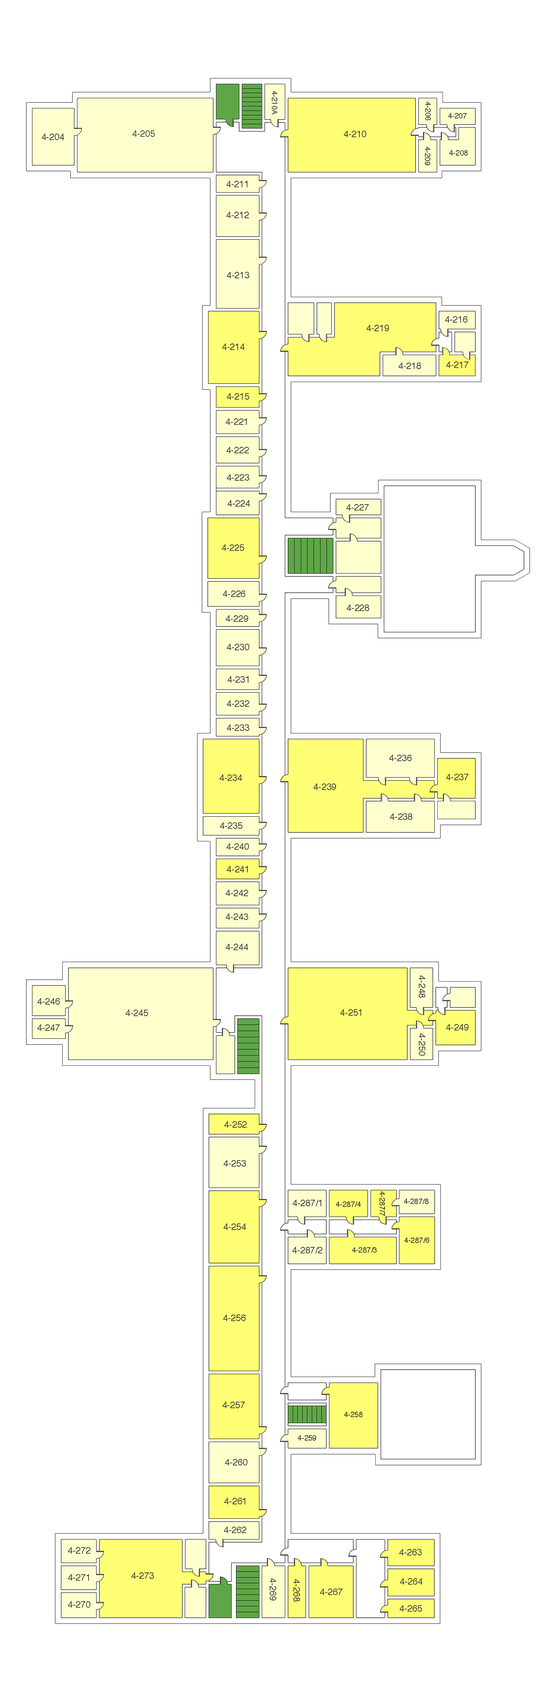
<style>
.page{position:relative;width:556px;height:1702px;background:#ffffff}
.page>*{position:absolute;margin:0}
.t1{font:7.5px "Helvetica";color:#3f3f3f}
.t2{font:9px "Helvetica";color:#3f3f3f}
</style>
<div class="page">
<p class="t1" style="left:272px;top:91px;width:5px;height:23px;rotate:90deg">4-210A</p>
<p class="t1" style="left:425px;top:102px;width:6px;height:18px;rotate:90deg">4-206</p>
<p class="t1" style="left:448px;top:113px;width:19px;height:5px">4-207</p>
<p class="t2" style="left:42px;top:134px;width:22px;height:6px">4-204</p>
<p class="t2" style="left:132px;top:130px;width:23px;height:7px">4-205</p>
<p class="t2" style="left:344px;top:131px;width:22px;height:6px">4-210</p>
<p class="t1" style="left:425px;top:147px;width:5px;height:18px;rotate:90deg">4-209</p>
<p class="t1" style="left:449px;top:150px;width:19px;height:6px">4-208</p>
<p class="t2" style="left:226px;top:181px;width:21px;height:6px">4-211</p>
<p class="t2" style="left:226px;top:212px;width:23px;height:6px">4-212</p>
<p class="t2" style="left:227px;top:272px;width:22px;height:6px">4-213</p>
<p class="t2" style="left:445px;top:316px;width:22px;height:7px">4-216</p>
<p class="t2" style="left:366px;top:325px;width:23px;height:6px">4-219</p>
<p class="t2" style="left:222px;top:343px;width:22px;height:7px">4-214</p>
<p class="t2" style="left:398px;top:362px;width:23px;height:7px">4-218</p>
<p class="t2" style="left:446px;top:361px;width:22px;height:7px">4-217</p>
<p class="t2" style="left:227px;top:393px;width:22px;height:7px">4-215</p>
<p class="t2" style="left:226px;top:418px;width:21px;height:7px">4-221</p>
<p class="t2" style="left:226px;top:447px;width:23px;height:6px">4-222</p>
<p class="t2" style="left:227px;top:474px;width:22px;height:7px">4-223</p>
<p class="t2" style="left:228px;top:500px;width:22px;height:6px">4-224</p>
<p class="t2" style="left:346px;top:504px;width:23px;height:6px">4-227</p>
<p class="t2" style="left:222px;top:544px;width:22px;height:7px">4-225</p>
<p class="t2" style="left:223px;top:590px;width:22px;height:7px">4-226</p>
<p class="t2" style="left:347px;top:604px;width:22px;height:7px">4-228</p>
<p class="t2" style="left:226px;top:615px;width:22px;height:7px">4-229</p>
<p class="t2" style="left:227px;top:644px;width:22px;height:6px">4-230</p>
<p class="t2" style="left:228px;top:676px;width:20px;height:7px">4-231</p>
<p class="t2" style="left:227px;top:700px;width:22px;height:7px">4-232</p>
<p class="t2" style="left:227px;top:724px;width:22px;height:7px">4-233</p>
<p class="t2" style="left:389px;top:755px;width:22px;height:6px">4-236</p>
<p class="t2" style="left:446px;top:774px;width:22px;height:6px">4-237</p>
<p class="t2" style="left:220px;top:774px;width:22px;height:7px">4-234</p>
<p class="t2" style="left:314px;top:783px;width:22px;height:7px">4-239</p>
<p class="t2" style="left:390px;top:813px;width:22px;height:7px">4-238</p>
<p class="t2" style="left:220px;top:822px;width:22px;height:7px">4-235</p>
<p class="t2" style="left:226px;top:843px;width:23px;height:7px">4-240</p>
<p class="t2" style="left:227px;top:866px;width:21px;height:6px">4-241</p>
<p class="t2" style="left:226px;top:890px;width:22px;height:6px">4-242</p>
<p class="t2" style="left:226px;top:913px;width:22px;height:7px">4-243</p>
<p class="t2" style="left:226px;top:944px;width:22px;height:6px">4-244</p>
<p class="t2" style="left:419px;top:975px;width:6px;height:22px;rotate:90deg">4-248</p>
<p class="t2" style="left:37px;top:998px;width:23px;height:6px">4-246</p>
<p class="t2" style="left:126px;top:1009px;width:22px;height:7px">4-245</p>
<p class="t2" style="left:340px;top:1009px;width:21px;height:6px">4-251</p>
<p class="t2" style="left:37px;top:1024px;width:23px;height:7px">4-247</p>
<p class="t2" style="left:446px;top:1024px;width:22px;height:6px">4-249</p>
<p class="t2" style="left:419px;top:1033px;width:6px;height:22px;rotate:90deg">4-250</p>
<p class="t2" style="left:224px;top:1121px;width:23px;height:6px">4-252</p>
<p class="t2" style="left:224px;top:1160px;width:22px;height:6px">4-253</p>
<p class="t1" style="left:379px;top:1191px;width:6px;height:25px;rotate:90deg">4-287/7</p>
<p class="t2" style="left:293px;top:1199px;width:28px;height:7px">4-287/1</p>
<p class="t1" style="left:336px;top:1201px;width:25px;height:6px">4-287/4</p>
<p class="t1" style="left:404px;top:1198px;width:24px;height:6px">4-287/8</p>
<p class="t2" style="left:224px;top:1223px;width:22px;height:7px">4-254</p>
<p class="t1" style="left:404px;top:1237px;width:25px;height:6px">4-287/6</p>
<p class="t2" style="left:292px;top:1247px;width:30px;height:6px">4-287/2</p>
<p class="t1" style="left:352px;top:1247px;width:25px;height:5px">4-287/3</p>
<p class="t2" style="left:223px;top:1314px;width:23px;height:7px">4-256</p>
<p class="t2" style="left:222px;top:1401px;width:23px;height:7px">4-257</p>
<p class="t1" style="left:344px;top:1411px;width:18px;height:6px">4-258</p>
<p class="t1" style="left:298px;top:1435px;width:18px;height:5px">4-259</p>
<p class="t2" style="left:225px;top:1459px;width:22px;height:6px">4-260</p>
<p class="t2" style="left:224px;top:1498px;width:21px;height:6px">4-261</p>
<p class="t2" style="left:224px;top:1526px;width:22px;height:7px">4-262</p>
<p class="t2" style="left:68px;top:1547px;width:22px;height:6px">4-272</p>
<p class="t2" style="left:399px;top:1549px;width:23px;height:6px">4-263</p>
<p class="t2" style="left:68px;top:1574px;width:21px;height:6px">4-271</p>
<p class="t2" style="left:131px;top:1572px;width:23px;height:7px">4-273</p>
<p class="t2" style="left:270px;top:1578px;width:6px;height:22px;rotate:90deg">4-269</p>
<p class="t2" style="left:400px;top:1578px;width:22px;height:6px">4-264</p>
<p class="t2" style="left:293px;top:1579px;width:7px;height:22px;rotate:90deg">4-268</p>
<p class="t2" style="left:320px;top:1588px;width:22px;height:7px">4-267</p>
<p class="t2" style="left:68px;top:1601px;width:22px;height:6px">4-270</p>
<p class="t2" style="left:400px;top:1605px;width:22px;height:6px">4-265</p>
</div>
